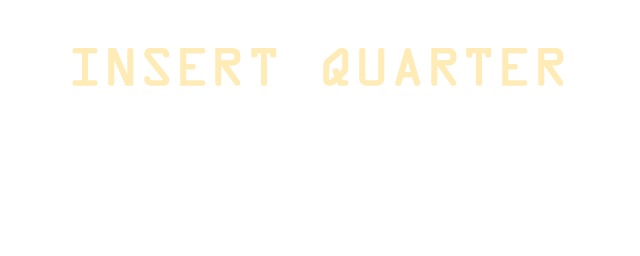
<style>
.page{position:relative;width:640px;height:256px;background:#ffffff}
.page>*{position:absolute;margin:0}
.t1{font:48px "OCRAStd";color:#ffebb6;font-weight:bold}
</style>
<div class="page">
<p class="t1" style="left:72px;top:48px;width:492px;height:38px">INSERT QUARTER</p>
</div>
